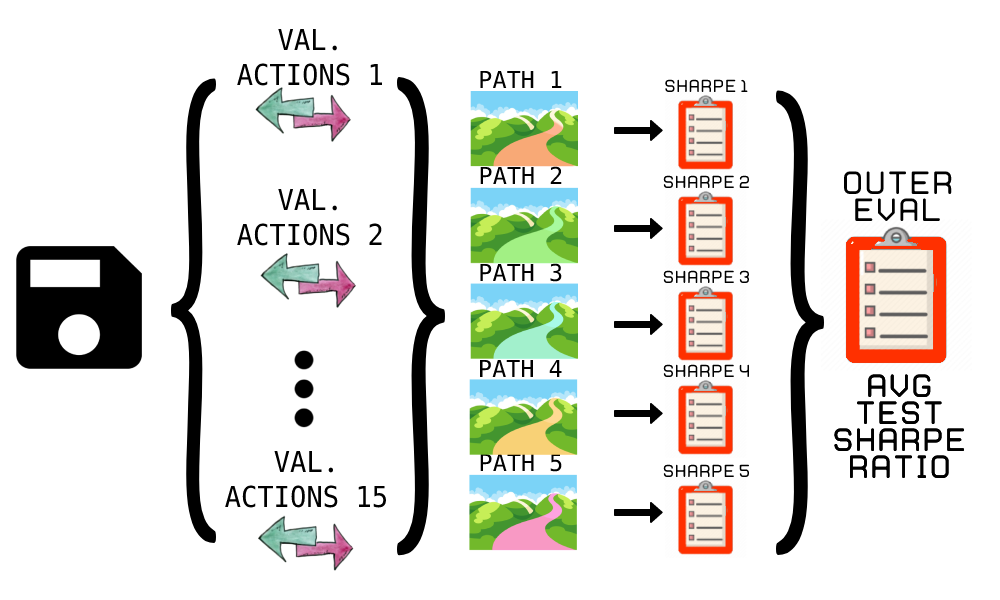
<style>
.page{position:relative;width:1000px;height:600px;background:#ffffff}
.page>*{position:absolute;margin:0}
.t1{font:28.9px "Hack-Regular";color:#000000;scale:0.94 1}
.t2{font:490.3px "ZenOldMincho-Regular";color:#000000;scale:0.36 1}
.t3{font:505.1px "ZenOldMincho-Regular";color:#000000;scale:0.37 1}
.t4{font:23.4px "Hack-Regular";color:#000000}
.t5{font:12.2px "WebHostingHub-Glyphs";color:#000000}
.t6{font:490.3px "ZenOldMincho-Regular";color:#000000;scale:0.38 1}
.t7{font:22.5px "WebHostingHub-Glyphs";color:#000000}
</style>
<div class="page">
<p class="t1" style="left:237px;top:29px;width:145px;height:57px;text-align:center">VAL.<br>ACTIONS 1</p>
<p class="t2" style="left:171px;top:78px;width:45px;height:465px;rotate:-180deg">}</p>
<p class="t3" style="left:397px;top:77px;width:48px;height:479px">}</p>
<p class="t4" style="left:480px;top:71px;width:82px;height:17px">PATH 1</p>
<p class="t5" style="left:665px;top:79px;width:83px;height:13px">Sharpe 1</p>
<p class="t6" style="left:776px;top:90px;width:48px;height:465px">}</p>
<p class="t4" style="left:480px;top:166px;width:82px;height:18px">PATH 2</p>
<p class="t7" style="left:844px;top:171px;width:108px;height:50px;text-align:center">outer<br>Eval</p>
<p class="t5" style="left:663px;top:175px;width:86px;height:13px">Sharpe 2</p>
<p class="t1" style="left:237px;top:189px;width:145px;height:57px;text-align:center">VAL.<br>ACTIONS 2</p>
<p class="t4" style="left:480px;top:263px;width:82px;height:19px">PATH 3</p>
<p class="t5" style="left:663px;top:270px;width:86px;height:13px">Sharpe 3</p>
<p class="t4" style="left:480px;top:360px;width:82px;height:17px">PATH 4</p>
<p class="t5" style="left:663px;top:364px;width:86px;height:13px">Sharpe 4</p>
<p class="t7" style="left:834px;top:374px;width:131px;height:104px;text-align:center">Avg<br>Test<br>Sharpe<br>Ratio</p>
<p class="t7" style="left:834px;top:374px;width:131px;height:104px;text-align:center">Avg<br>Test<br>Sharpe<br>Ratio</p>
<p class="t1" style="left:225px;top:451px;width:161px;height:57px;text-align:center">VAL.<br>ACTIONS 15</p>
<p class="t4" style="left:480px;top:454px;width:82px;height:18px">PATH 5</p>
<p class="t5" style="left:663px;top:464px;width:86px;height:13px">Sharpe 5</p>
</div>
